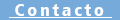
<style>
.page{position:relative;width:120px;height:20px;background:#76aadb}
.page>*{position:absolute;margin:0}
.t1{font:18px "Humanist777BT-BlackCondensedB";letter-spacing:0.16em;color:#ffffff}
</style>
<div class="page">
<p class="t1" style="left:15px;top:4px;width:89px;height:12px">Contacto</p>
</div>
